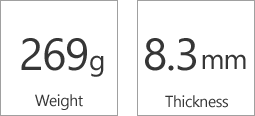
<style>
.page{position:relative;width:255px;height:116px;background:#ffffff}
.page>*{position:absolute;margin:0}
.t1{font:45px "SegoeUI";letter-spacing:-0.03em;color:#363636}
.t2{font:28px "SegoeUI";letter-spacing:-0.03em;color:#363636}
.t3{font:16px "SegoeUI";letter-spacing:-0.03em;color:#363636}
</style>
<div class="page">
<p class="t1" style="left:21px;top:38px;width:66px;height:33px">269</p>
<p class="t1" style="left:145px;top:38px;width:51px;height:33px">8.3</p>
<p class="t2" style="left:202px;top:54px;width:44px;height:15px">mm</p>
<p class="t2" style="left:90px;top:55px;width:14px;height:22px">g</p>
<p class="t3" style="left:35px;top:94px;width:48px;height:16px">Weight</p>
<p class="t3" style="left:165px;top:95px;width:63px;height:13px">Thickness</p>
</div>
